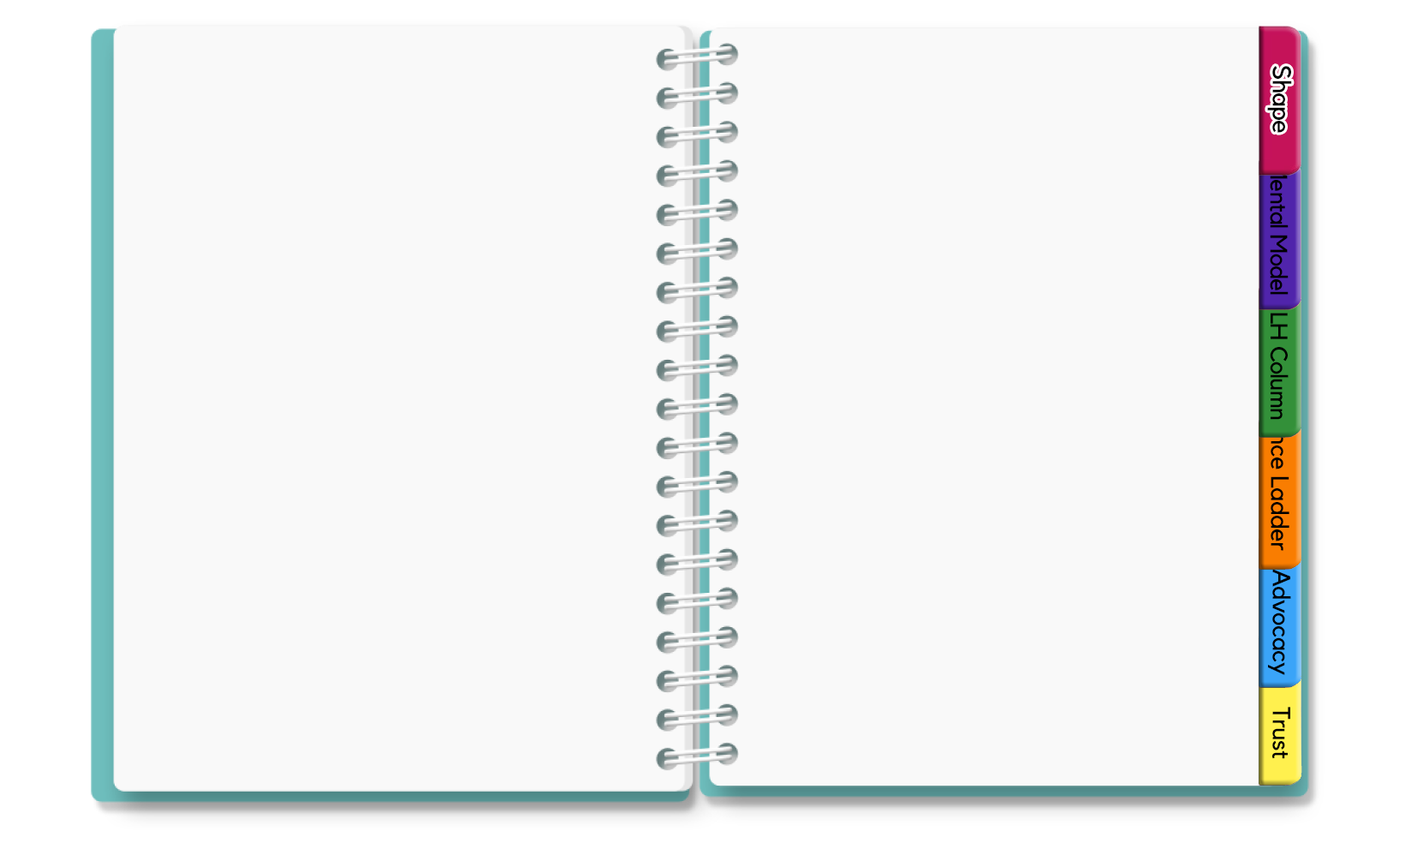
<style>
.page{position:relative;width:1405px;height:849px;background:#f9f9f9}
.page>*{position:absolute;margin:0}
.t1{font:25.6px "Kollektif";letter-spacing:-0.025em;color:#000000}
.t2{font:24px "Kollektif";letter-spacing:-0.025em;color:#000000}
.t3{font:25.1px "Kollektif";letter-spacing:-0.025em;color:#000000}
.t4{font:24.7px "Kollektif";letter-spacing:-0.025em}
.t5{font:24.7px "Kollektif";letter-spacing:-0.025em;color:#000000}
</style>
<div class="page">
<p class="t1" style="left:1267px;top:66px;width:25px;height:67px;rotate:90deg">Shape</p>
<p class="t2" style="left:1270px;top:161px;width:19px;height:134px;rotate:90deg">Mental Model</p>
<p class="t2" style="left:1270px;top:313px;width:19px;height:107px;rotate:90deg">LH Column</p>
<p class="t3" style="left:1271px;top:368px;width:19px;height:183px;rotate:90deg">Inference Ladder</p>
<p class="t4" style="left:1267px;top:469px;width:24px;height:206px;rotate:90deg">Inquiry &amp; Advocacy</p>
<p class="t5" style="left:1272px;top:706px;width:18px;height:53px;rotate:90deg">Trust</p>
</div>
